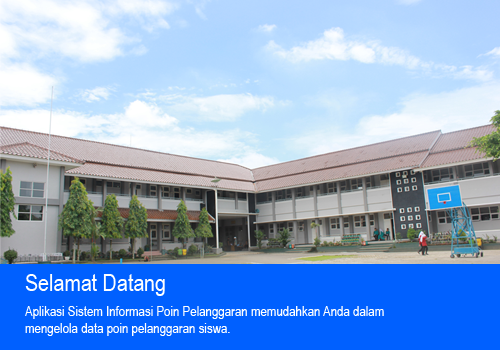
<style>
.page{position:relative;width:500px;height:350px;background:#0060ff}
.page>*{position:absolute;margin:0}
.t1{font:24px "ArialNarrow";color:#ffffff}
.t2{font:14px "ArialNarrow";color:#ffffff}
</style>
<div class="page">
<p class="t1" style="left:25px;top:274px;width:140px;height:22px">Selamat Datang</p>
<p class="t2" style="left:25px;top:306px;width:359px;height:30px">Aplikasi Sistem Informasi Poin Pelanggaran memudahkan Anda dalam mengelola data poin pelanggaran siswa.</p>
</div>
